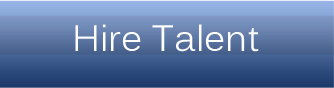
<style>
.page{position:relative;width:334px;height:88px}
.page>*{position:absolute;margin:0}
.t1{font:36.3px "Kalinga";color:#ffffff}
</style>
<div class="page">
<p class="t1" style="left:75px;top:24px;width:184px;height:28px">Hire Talent</p>
</div>
